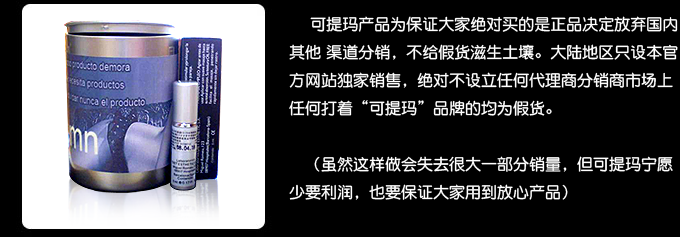
<style>
.page{position:relative;width:680px;height:237px;background:#000000}
.page>*{position:absolute;margin:0}
.t1{font:16px/28px "DFPYuanW7";color:#ffffff}
</style>
<div class="page">
<p class="t1" style="left:289px;top:16px;width:389px;height:184px">可提玛产品为保证大家绝对买的是正品决定放弃国内其他 渠道分销，不给假货滋生土壤。大陆地区只设本官方网站独家销售，绝对不设立任何代理商分销商市场上任何打着“可提玛”品牌的均为假货。<br><br>   （虽然这样做会失去很大一部分销量，但可提玛宁愿少要利润，也要保证大家用到放心产品）</p>
</div>
